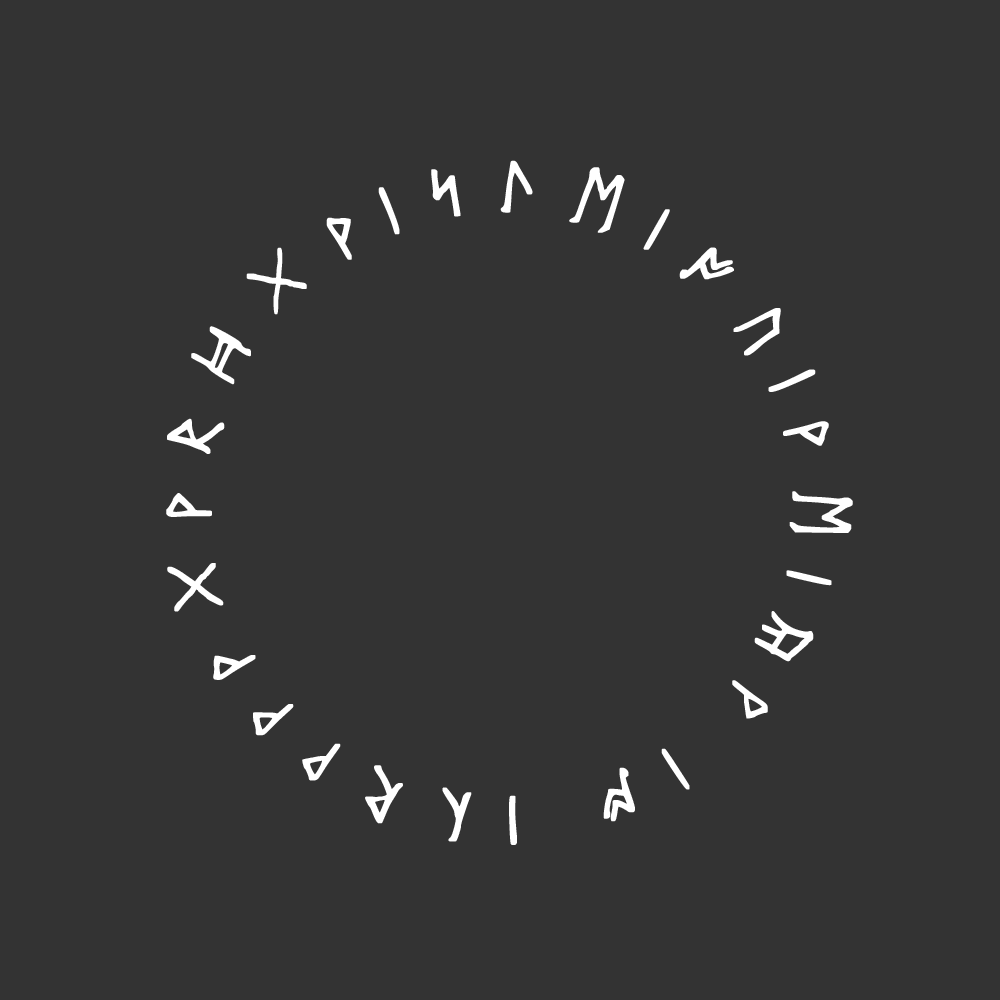
<style>
.page{position:relative;width:1000px;height:1000px;background:#333333}
.page>*{position:absolute;margin:0}
.t1{font:96.7px/4.4px "AncientRunes";letter-spacing:0.34em;color:#ffffff;font-weight:bold}
.t2{font:55px/4.4px "AncientRunes";letter-spacing:0.34em;color:#ffffff;font-weight:bold}
</style>
<div class="page">
<p class="t1" style="left:166px;top:160px;width:687px;height:685px;text-align:right">JSLEIOVJWEIYWQIOQJCRWWWGWRHGW WLEIVNWOIVBLWSKÑAOLC <span class="t2">WLJKWDEWV</span></p>
</div>
